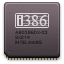
<style>
.page{position:relative;width:64px;height:64px}
.page>*{position:absolute;margin:0}
.t1{font:16px "TimesNewRomanPSMT";color:#dad6d8}
.t2{font:16px "TimesNewRomanPSMT";letter-spacing:-0.025em;color:#dad6d8}
.t3{font:4.6px/5px "Geneva"}
</style>
<div class="page">
<p class="t1" style="left:24px;top:15px;width:23px;height:11px"><span class="t2">3</span>86</p>
<p class="t3" style="left:15px;top:30px;width:33px;height:14px">A80386DX-33<br>SX214<br>INTEL®©85</p>
</div>
